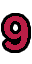
<style>
.page{position:relative;width:32px;height:64px;background:#ffffff}
.page>*{position:absolute;margin:0}
.t1{font:47px "ArialRoundedMTBold";color:#ba1e46}
</style>
<div class="page">
<p class="t1" style="left:4px;top:16px;width:24px;height:34px">9</p>
</div>
